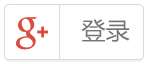
<style>
.page{position:relative;width:148px;height:64px;background:#ffffff}
.page>*{position:absolute;margin:0}
.t1{font:24px "MicrosoftYaHei";letter-spacing:0.01em;color:#737373}
</style>
<div class="page">
<p class="t1" style="left:81px;top:19px;width:49px;height:23px">登录</p>
</div>
